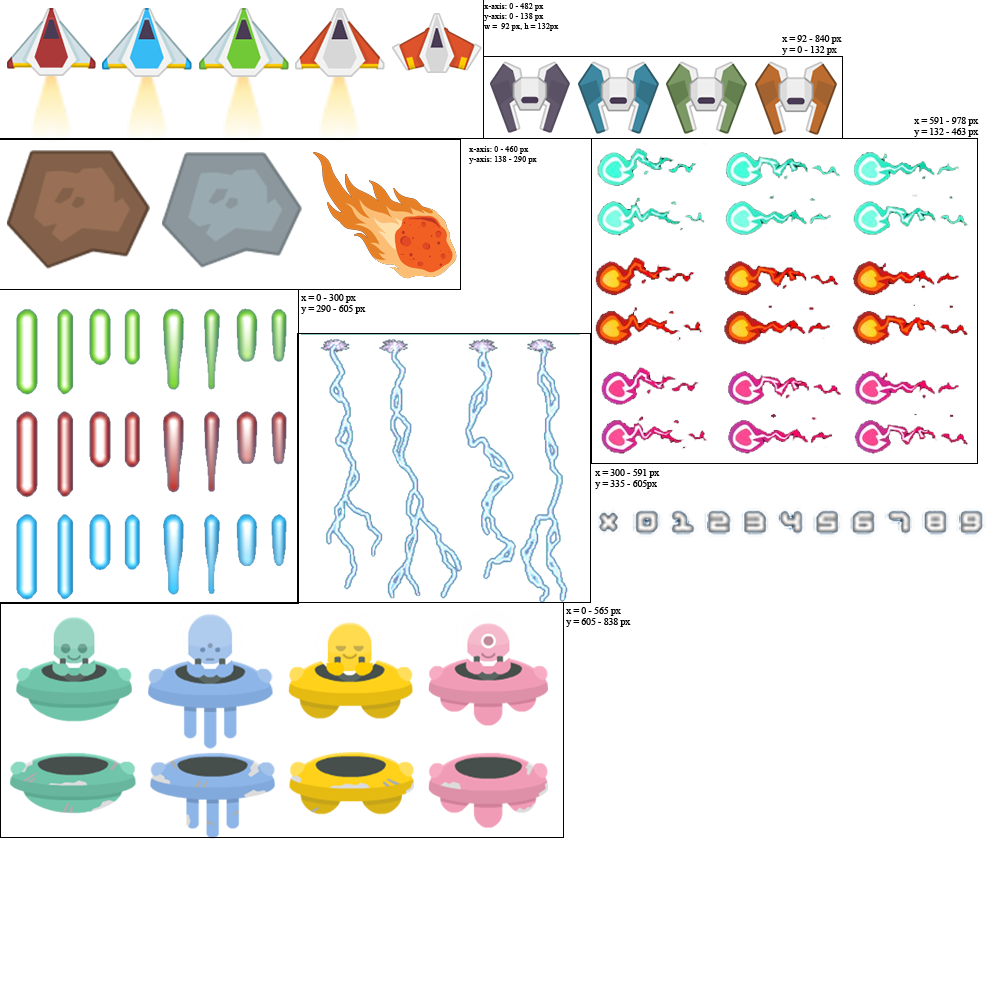
<style>
.page{position:relative;width:1000px;height:1000px;background:#ffffff}
.page>*{position:absolute;margin:0}
.t1{font:9.6px "TimesNewRomanPSMT";color:#020000}
</style>
<div class="page">
<p class="t1" style="left:782px;top:35px;width:60px;height:20px">x = 92 - 840 px<br>y = 0 - 132 px</p>
<p class="t1" style="left:914px;top:117px;width:65px;height:20px">x = 591 - 978 px<br>y = 132 - 463 px</p>
<p class="t1" style="left:301px;top:294px;width:65px;height:20px">x = 0 - 300 px<br>y = 290 - 605 px</p>
<p class="t1" style="left:595px;top:469px;width:65px;height:20px">x = 300 - 591 px<br>y = 335 - 605px</p>
<p class="t1" style="left:566px;top:607px;width:65px;height:20px">x = 0 - 565 px<br>y = 605 - 838 px</p>
</div>
